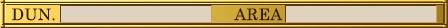
<style>
.page{position:relative;width:448px;height:28px;background:#dfd3c0}
.page>*{position:absolute;margin:0}
.t1{font:16px "CenturySchoolbook";letter-spacing:0.025em;color:#321a02}
</style>
<div class="page">
<p class="t1" style="left:12px;top:8px;width:43px;height:13px">DUN.</p>
<p class="t1" style="left:234px;top:8px;width:49px;height:13px">AREA</p>
</div>
